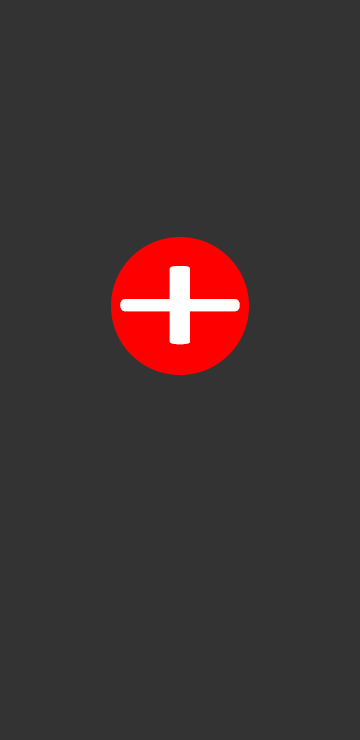
<style>
.page{position:relative;width:360px;height:740px;background:#333333}
.page>*{position:absolute;margin:0}
.t1{font:170.6px "Calibri";color:#ffffff;scale:1.62 1}
</style>
<div class="page">
<p class="t1" style="left:120px;top:266px;width:120px;height:79px">+</p>
</div>
